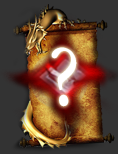
<style>
.page{position:relative;width:118px;height:154px;background:#333333}
.page>*{position:absolute;margin:0}
.t1{font:94.5px "MonotypeCorsiva";color:#ffffff}
</style>
<div class="page">
<p class="t1" style="left:51px;top:47px;width:26px;height:60px;rotate:-20deg">?</p>
</div>
